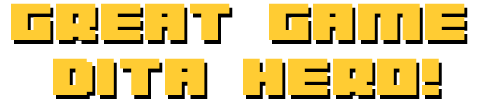
<style>
.page{position:relative;width:480px;height:106px;background:#ffcc33}
.page>*{position:absolute;margin:0}
.t1{font:46.2px "04b19";color:#ffcc33;scale:1.7 1}
</style>
<div class="page">
<p class="t1" style="left:11px;top:3px;width:454px;height:92px">GREAT GAME<br>DITA HERO!</p>
<p class="t1" style="left:14px;top:7px;width:454px;height:92px">GREAT GAME<br>DITA HERO!</p>
</div>
